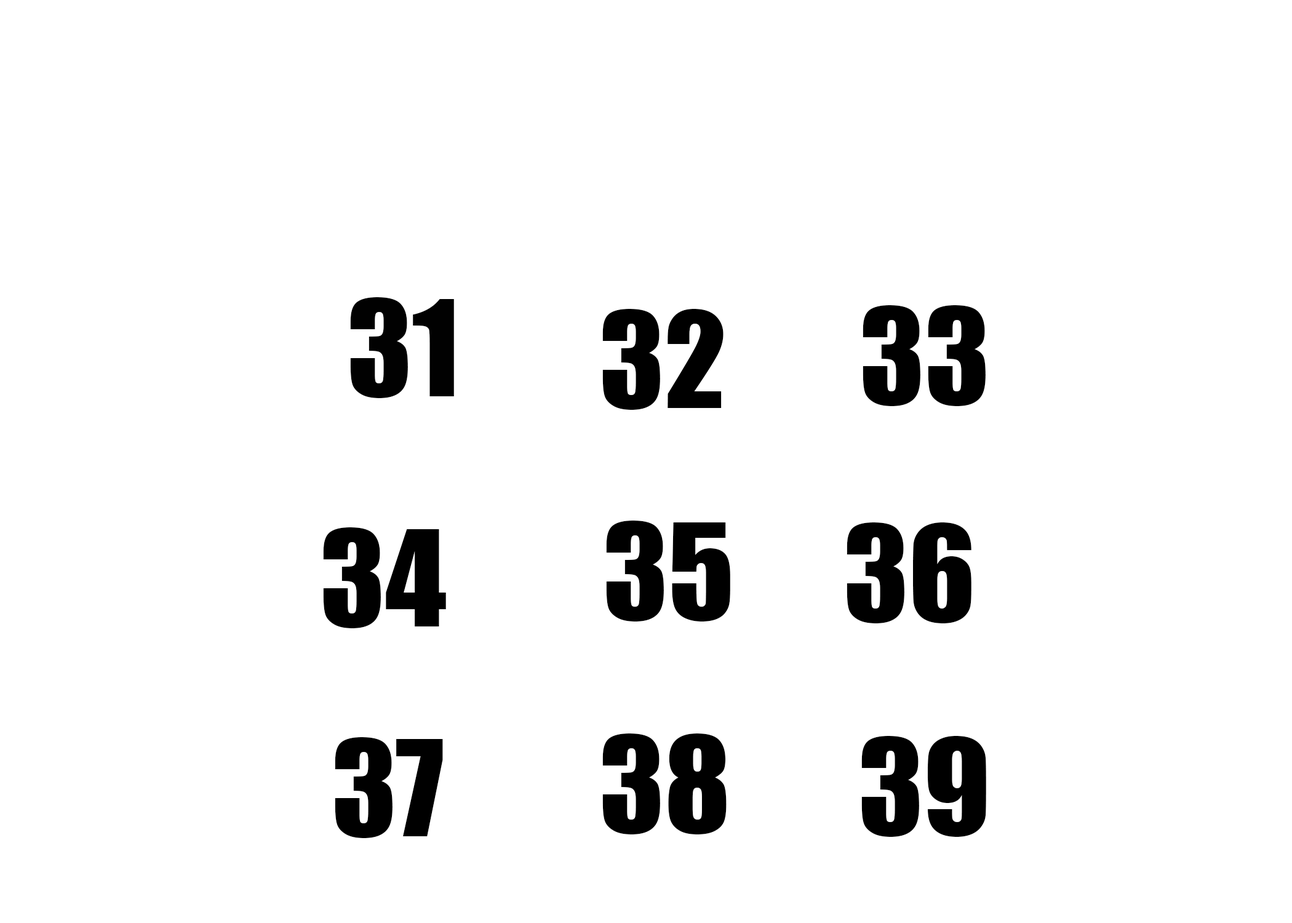
<style>
.page{position:relative;width:1292px;height:923px;background:#ffffff}
.page>*{position:absolute;margin:0}
.t1{font:123.1px "Impact";color:#010101}
.t2{font:123.1px "Impact";color:#000000}
</style>
<div class="page">
<p class="t1" style="left:350px;top:297px;width:104px;height:101px">31</p>
<p class="t2" style="left:863px;top:305px;width:123px;height:101px">33</p>
<p class="t2" style="left:602px;top:309px;width:122px;height:101px">32</p>
<p class="t2" style="left:606px;top:521px;width:124px;height:100px">35</p>
<p class="t2" style="left:323px;top:527px;width:123px;height:101px">34</p>
<p class="t2" style="left:847px;top:522px;width:125px;height:101px">36</p>
<p class="t2" style="left:335px;top:737px;width:108px;height:101px">37</p>
<p class="t2" style="left:602px;top:733px;width:125px;height:101px">38</p>
<p class="t2" style="left:861px;top:736px;width:125px;height:101px">39</p>
</div>
